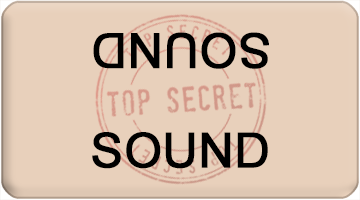
<style>
.page{position:relative;width:360px;height:200px;background:#e8d0bb}
.page>*{position:absolute;margin:0}
.t1{font:48px "ArialMT";color:#000000;font-weight:bold}
</style>
<div class="page">
<p class="t1" style="left:93px;top:32px;width:176px;height:37px;rotate:180deg">SOUND</p>
<p class="t1" style="left:92px;top:132px;width:176px;height:37px">SOUND</p>
</div>
